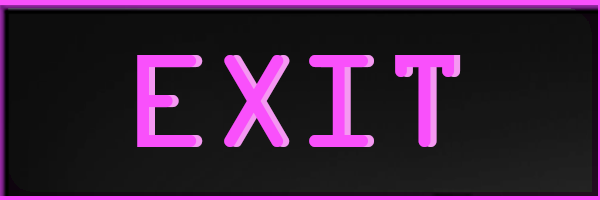
<style>
.page{position:relative;width:600px;height:200px}
.page>*{position:absolute;margin:0}
.t1{font:142px "OCRAExtended";color:#f950fb}
.t2{font:142px "OCRAExtended"}
</style>
<div class="page">
<p class="t1" style="left:137px;top:55px;width:318px;height:92px">EXIT</p>
<p class="t2" style="left:143px;top:55px;width:318px;height:92px">EXIT</p>
</div>
